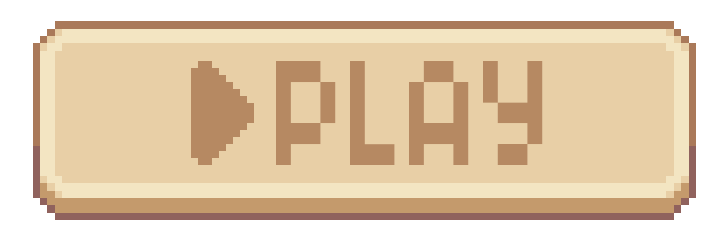
<style>
.page{position:relative;width:728px;height:242px;background:#e8cfa6}
.page>*{position:absolute;margin:0}
.t1{font:166.3px "04b03";color:#b68962;scale:0.71 1}
</style>
<div class="page">
<p class="t1" style="left:276px;top:61px;width:267px;height:104px">PLAY</p>
</div>
